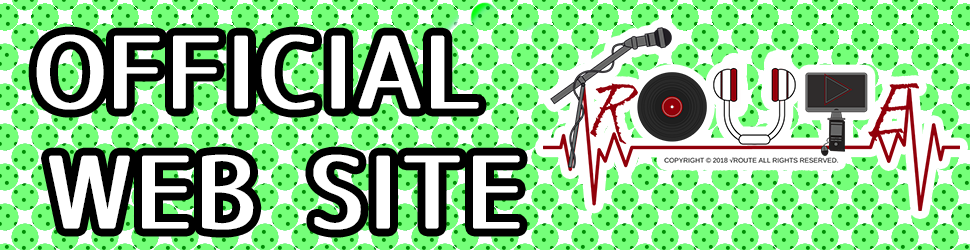
<style>
.page{position:relative;width:970px;height:250px;background:#75ff79}
.page>*{position:absolute;margin:0}
.t1{font:100px "07LogoTypeGothic7";color:#ffffff;font-weight:bold}
</style>
<div class="page">
<p class="t1" style="left:36px;top:34px;width:484px;height:196px;text-align:center">OFFICIAL<br> WEB SITE</p>
</div>
